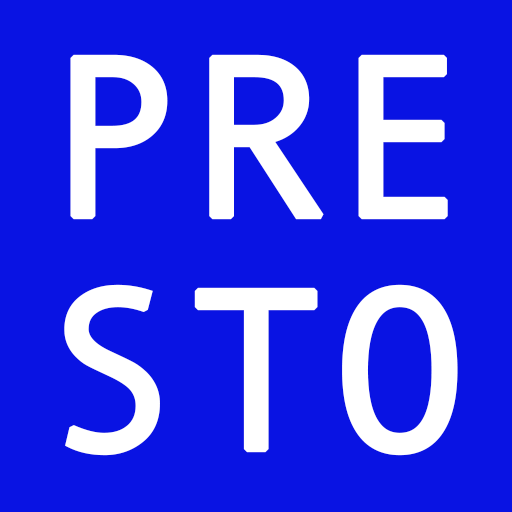
<style>
.page{position:relative;width:512px;height:512px;background:#0913e3}
.page>*{position:absolute;margin:0}
.t1{font:230px "AndaleMono";color:#ffffff;font-weight:bold}
</style>
<div class="page">
<p class="t1" style="left:70px;top:54px;width:378px;height:166px">PRE</p>
<p class="t1" style="left:64px;top:284px;width:394px;height:172px">STO</p>
</div>
